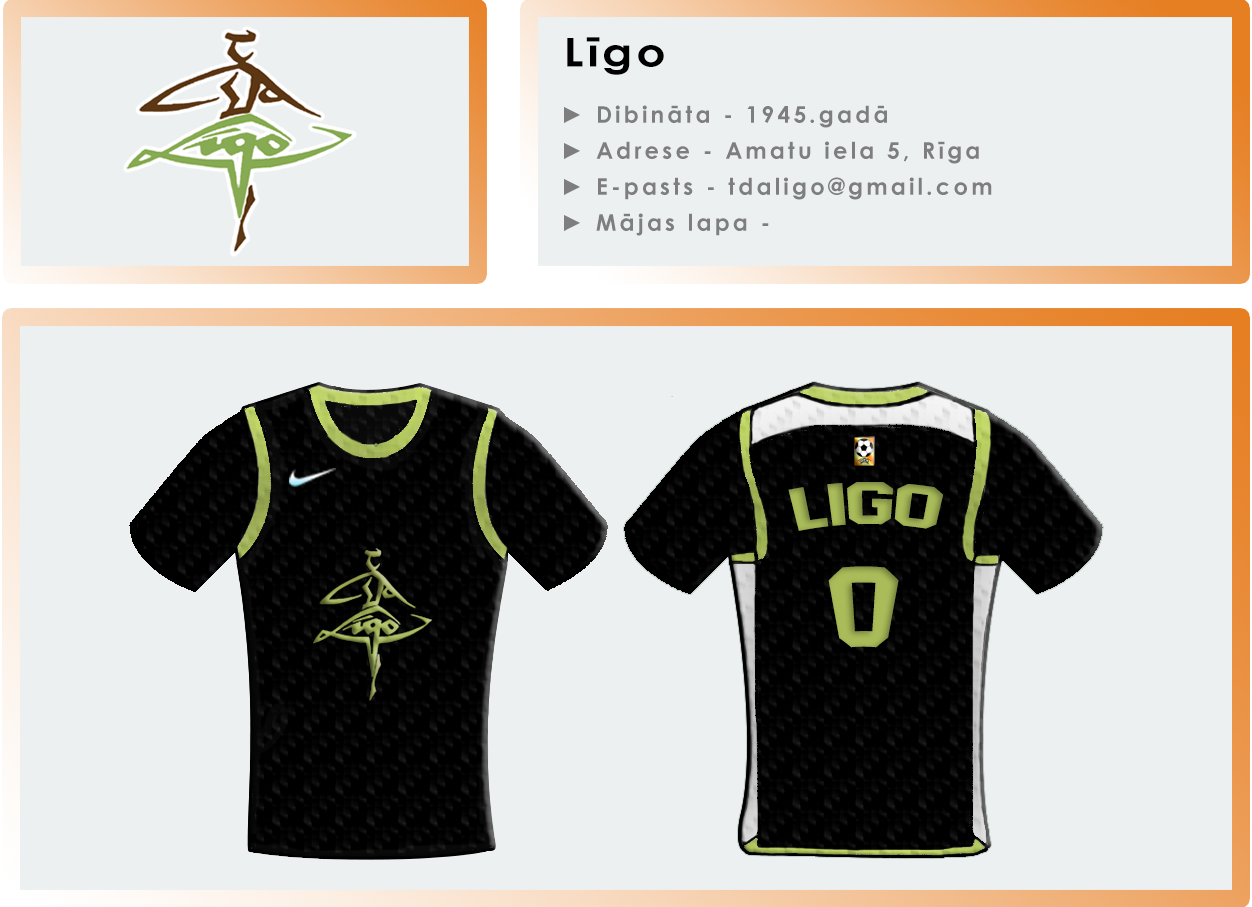
<style>
.page{position:relative;width:1252px;height:907px;background:#ecf0f1}
.page>*{position:absolute;margin:0}
.t1{font:39.7px "CenturyGothic-Bold";letter-spacing:0.08em;color:#000000;scale:1.16 1}
.t2{font:23.1px/36px "CenturyGothic-Bold";letter-spacing:0.14em;color:#7e7e7e}
.t3{font:59.4px "AdidasHalfBlock2016";color:#a9bc59;scale:1.13 1}
.t4{font:113.8px "AdidasHalfBlock2016";color:#a9bc59}
</style>
<div class="page">
<p class="t1" style="left:567px;top:37px;width:97px;height:38px">Līgo</p>
<p class="t2" style="left:564px;top:105px;width:428px;height:131px">► Dibināta - 1945.gadā<br>► Adrese - Amatu iela 5, Rīga<br>► E-pasts - tdaligo@gmail.com<br>► Mājas lapa -</p>
<p class="t3" style="left:788px;top:482px;width:156px;height:49px">Ligo</p>
<p class="t4" style="left:828px;top:566px;width:71px;height:82px">0</p>
</div>
